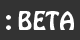
<style>
.page{position:relative;width:80px;height:40px;background:#333333}
.page>*{position:absolute;margin:0}
.t1{font:22px "HoboStd";color:#ffffff}
</style>
<div class="page">
<p class="t1" style="left:6px;top:11px;width:68px;height:19px">: BETA</p>
</div>
